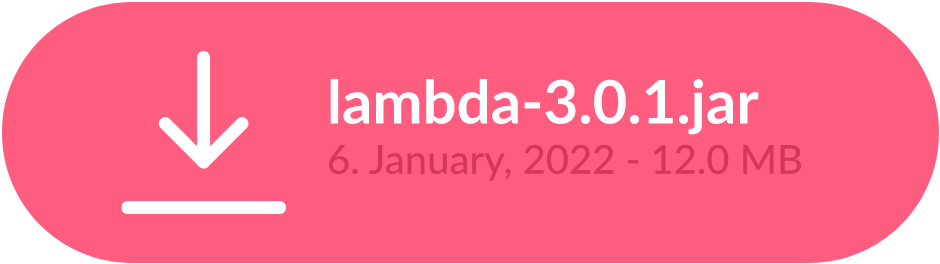
<style>
.page{position:relative;width:940px;height:264px;background:#ff5d7f}
.page>*{position:absolute;margin:0}
.t1{font:60px/22.6px "Lato-Bold";color:#ffffff}
.t2{font:40px "Lato-Medium";color:#d63758}
</style>
<div class="page">
<p class="t1" style="left:330px;top:78px;width:429px;height:57px">lambda-3.0.1.jar<br><br><br>442</p>
<p class="t2" style="left:329px;top:144px;width:473px;height:37px">6. January, 2022 - 12.0 MB</p>
</div>
